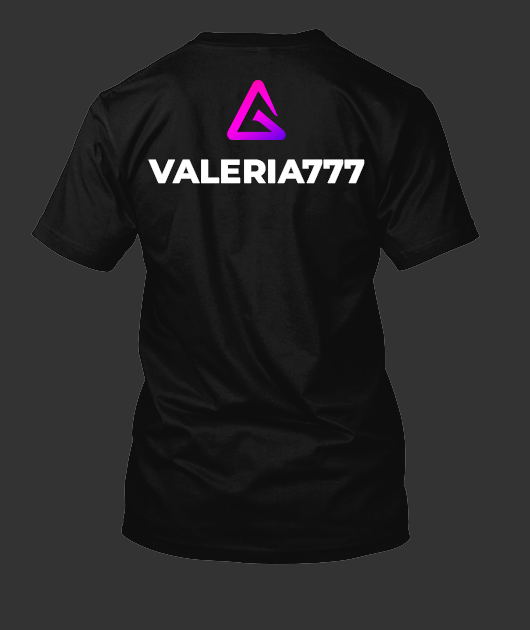
<style>
.page{position:relative;width:530px;height:630px;background:#333333}
.page>*{position:absolute;margin:0}
.t1{font:33.3px "MontserratRoman-ExtraBold";color:#ffffff;text-transform:uppercase}
</style>
<div class="page">
<p class="t1" style="left:148px;top:159px;width:217px;height:25px">valeria777</p>
</div>
